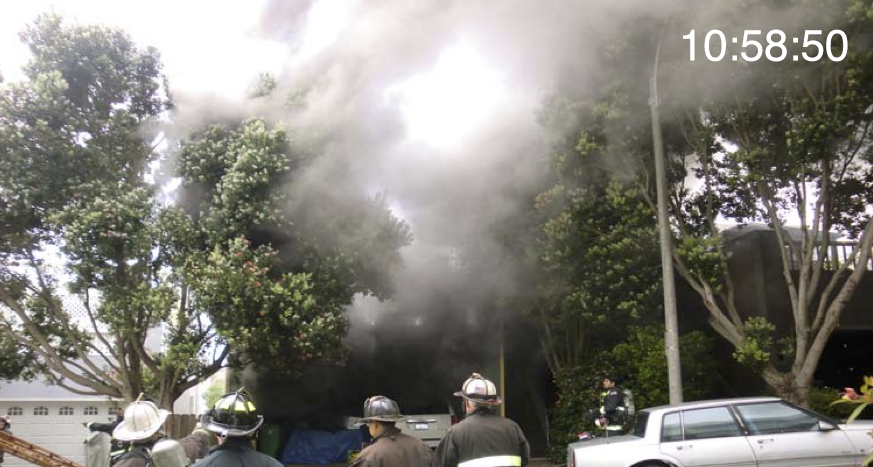
<style>
.page{position:relative;width:873px;height:467px}
.page>*{position:absolute;margin:0}
.t1{font:43.8px "Helvetica";color:#ffffff}
</style>
<div class="page">
<p class="t1" style="left:683px;top:29px;width:165px;height:33px">10:58:50</p>
</div>
